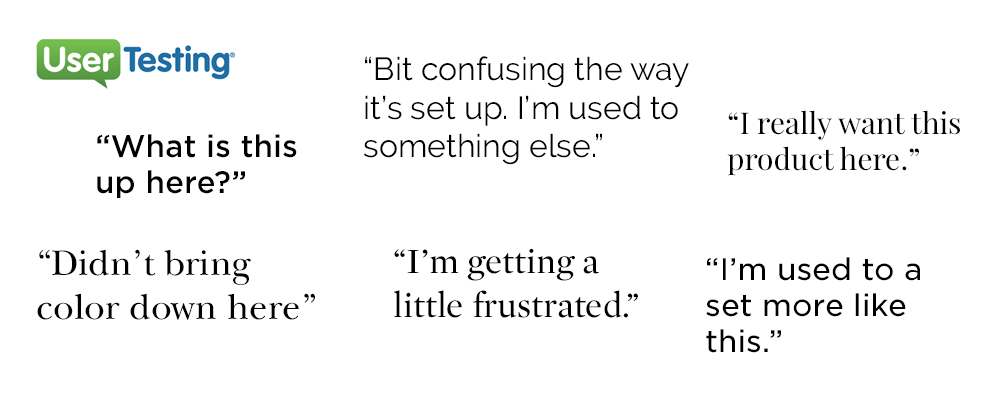
<style>
.page{position:relative;width:1000px;height:400px;background:#ffffff}
.page>*{position:absolute;margin:0}
.t1{font:32px "Raleway-Regular";color:#000000}
.t2{font:30px "PlayfairDisplay-Regular";color:#000000}
.t3{font:30px "GothamSSm-Medium";color:#000000}
.t4{font:37px "NewBaskerville-Roman";color:#000000}
.t5{font:36px "MercuryDisplay-Roman";color:#000000}
.t6{font:30px "GothamSSm-Book";color:#000000}
</style>
<div class="page">
<p class="t1" style="left:364px;top:56px;width:325px;height:109px">“Bit confusing the way it’s set up. I’m used to something else.”</p>
<p class="t2" style="left:727px;top:110px;width:233px;height:66px">“I really want this product here.”</p>
<p class="t3" style="left:97px;top:134px;width:200px;height:64px">“What is this up here?”</p>
<p class="t4" style="left:37px;top:249px;width:278px;height:71px">“Didn’t bring color down here”</p>
<p class="t5" style="left:394px;top:248px;width:244px;height:70px">“I’m getting a little frustrated.”</p>
<p class="t6" style="left:706px;top:257px;width:214px;height:96px">“I’m used to a set more like this.”</p>
</div>
